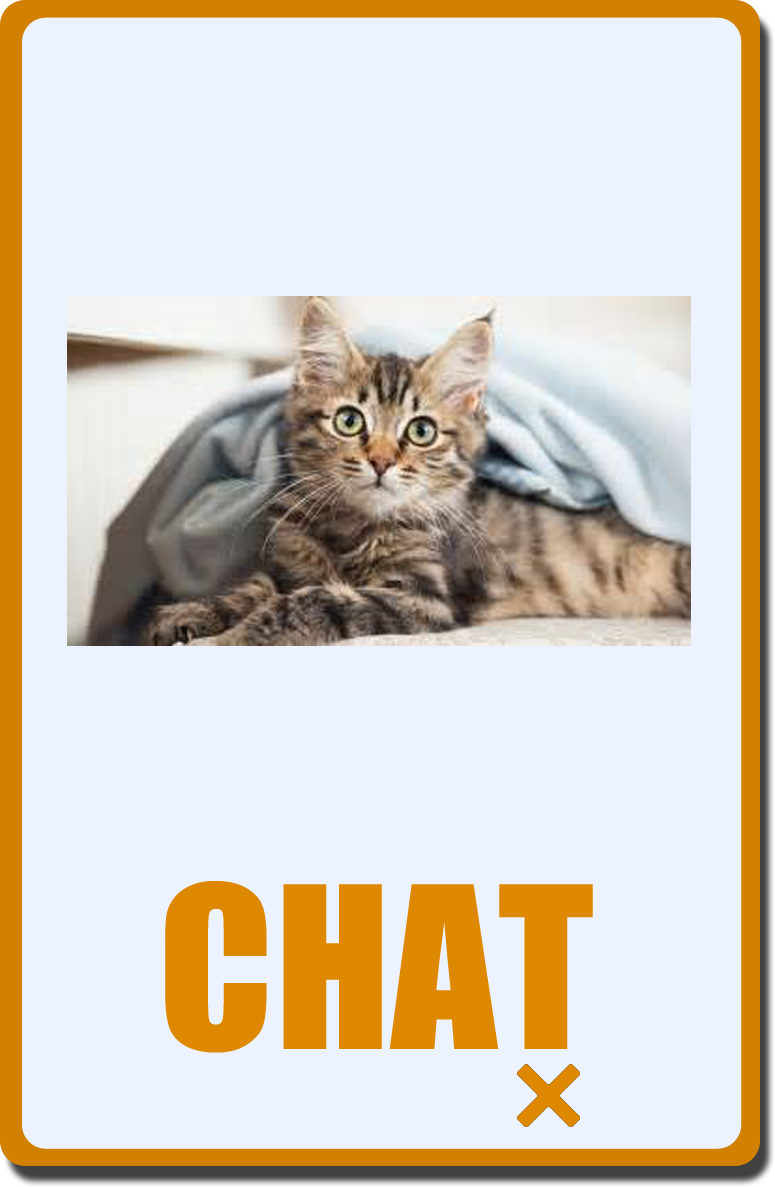
<style>
.page{position:relative;width:775px;height:1187px;background:#ecf2ff}
.page>*{position:absolute;margin:0}
.t1{font:208.3px "Impact";letter-spacing:0.005em;color:#de8800}
</style>
<div class="page">
<p class="t1" style="left:165px;top:881px;width:428px;height:172px">CHAT</p>
</div>
